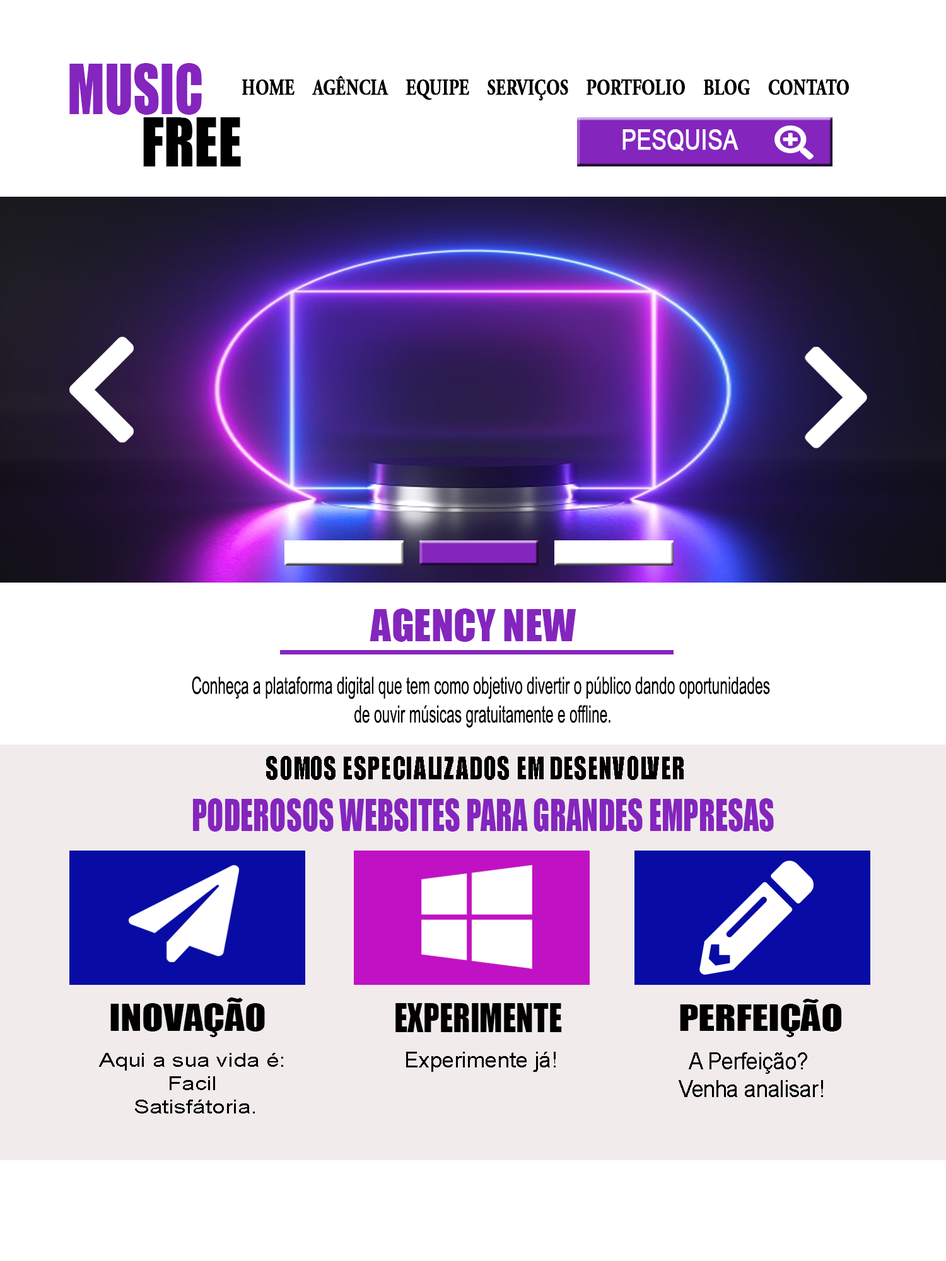
<style>
.page{position:relative;width:946px;height:1261px;background:#ffffff}
.page>*{position:absolute;margin:0}
.t1{font:63.8px "Impact";color:#8425be;scale:0.81 1}
.t2{font:22.1px "AGaramondPro-Bold";color:#000000;font-weight:bold;scale:0.75 1}
.t3{font:62.4px "Impact";color:#000000;scale:0.91 1}
.t4{font:27.7px "ArialMT";color:#ffffff;font-weight:bold;scale:0.79 1}
.t5{font:41.1px "Impact";color:#8425be}
.t6{font:23.9px "ArialMT";color:#000000;scale:0.6 1}
.t7{font:28.7px "Impact";color:#000000;scale:0.86 1}
.t8{font:40.1px "Impact";color:#8425be;scale:0.76 1}
.t9{font:34.9px "Impact";color:#000000;scale:1.13 1}
.t10{font:33.5px "Impact";color:#000000;scale:1.18 1}
.t11{font:36.3px "Impact";color:#000000;scale:0.89 1}
.t12{font:19.4px "ArialMT";color:#000000;scale:1.21 1}
.t13{font:21.3px "ArialMT";color:#000000;scale:1.03 1}
.t14{font:23px "ArialMT";color:#000000;scale:0.92 1}
</style>
<div class="page">
<p class="t1" style="left:69px;top:63px;width:133px;height:52px">MUSIC</p>
<p class="t2" style="left:242px;top:76px;width:607px;height:25px">HOME    AGÊNCIA    EQUIPE    SERVIÇOS    PORTFOLIO    BLOG    CONTATO</p>
<p class="t3" style="left:143px;top:117px;width:98px;height:49px">FREE</p>
<p class="t4" style="left:622px;top:129px;width:116px;height:22px">PESQUISA</p>
<p class="t5" style="left:369px;top:608px;width:207px;height:34px">AGENCY NEW</p>
<p class="t6" style="left:192px;top:676px;width:578px;height:52px;text-align:center">Conheça a plataforma digital que tem como objetivo divertir o público dando oportunidades <br>de ouvir músicas gratuitamente e offline.</p>
<p class="t7" style="left:266px;top:756px;width:417px;height:24px">SOMOS ESPECIALIZADOS EM DESENVOLVER</p>
<p class="t8" style="left:193px;top:798px;width:581px;height:34px">PODEROSOS WEBSITES PARA GRANDES EMPRESAS</p>
<p class="t9" style="left:110px;top:997px;width:155px;height:40px">INOVAÇÃO</p>
<p class="t10" style="left:680px;top:999px;width:162px;height:38px">PERFEIÇÃO</p>
<p class="t11" style="left:395px;top:1003px;width:167px;height:29px">EXPERIMENTE</p>
<p class="t12" style="left:99px;top:1053px;width:184px;height:60px;text-align:center">Aqui a sua vida é:<br>Facil<br> Satisfátoria.</p>
<p class="t13" style="left:406px;top:1052px;width:149px;height:20px">Experimente já!</p>
<p class="t14" style="left:678px;top:1052px;width:145px;height:45px;text-align:center">A Perfeição? <br>Venha analisar!</p>
</div>
